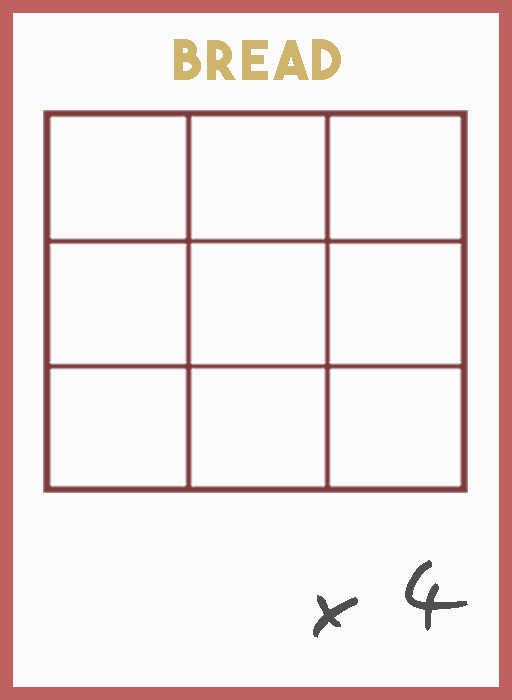
<style>
.page{position:relative;width:512px;height:700px;background:#fbfbfb}
.page>*{position:absolute;margin:0}
.t1{font:54.5px "TheBoldFont";letter-spacing:0.05em;color:#ceb36a}
.t2{font:106.1px "EasySpeech";letter-spacing:0.05em;color:#4f4f4f}
</style>
<div class="page">
<p class="t1" style="left:174px;top:39px;width:167px;height:41px">bread</p>
<p class="t2" style="left:313px;top:560px;width:155px;height:78px">x 4</p>
</div>
